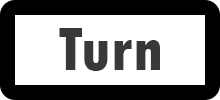
<style>
.page{position:relative;width:220px;height:100px;background:#ffffff}
.page>*{position:absolute;margin:0}
.t1{font:63.5px "TwCenMT-CondensedExtraBold";color:#383838}
</style>
<div class="page">
<p class="t1" style="left:59px;top:28px;width:101px;height:43px">Turn</p>
</div>
